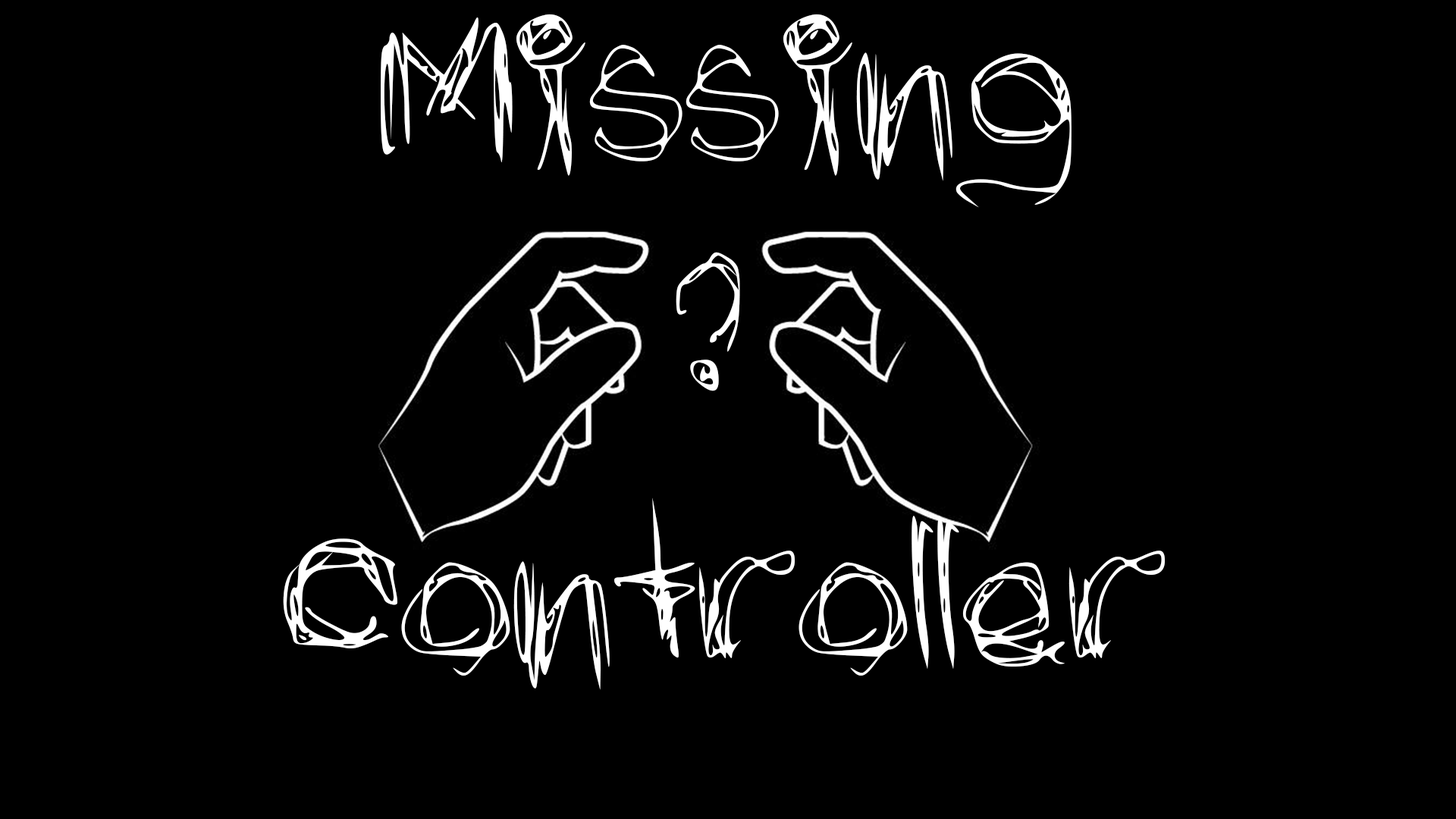
<style>
.page{position:relative;width:1456px;height:819px;background:#000000}
.page>*{position:absolute;margin:0}
.t1{font:227.5px "curved";color:#ffffff}
.t2{font:214.9px "curved";color:#ffffff}
</style>
<div class="page">
<p class="t1" style="left:381px;top:14px;width:691px;height:194px">Missing</p>
<p class="t2" style="left:676px;top:252px;width:64px;height:139px">?</p>
<p class="t1" style="left:283px;top:497px;width:882px;height:193px">Controller</p>
</div>
